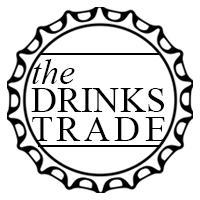
<style>
.page{position:relative;width:200px;height:200px;background:#ffffff}
.page>*{position:absolute;margin:0}
.t1{font:36.5px/28px "TimesNewRomanPSMT";color:#000000}
.t2{font:36.5px "TimesNewRomanPS-ItalicMT";color:#000000}
.t3{font:36.5px/29.2px "TimesNewRomanPSMT";letter-spacing:0.1em;color:#000000}
</style>
<div class="page">
<p class="t1" style="left:31px;top:59px;width:136px;height:82px"><span class="t2">the<br></span>DRINKS<br><span class="t3">TRADE</span></p>
</div>
